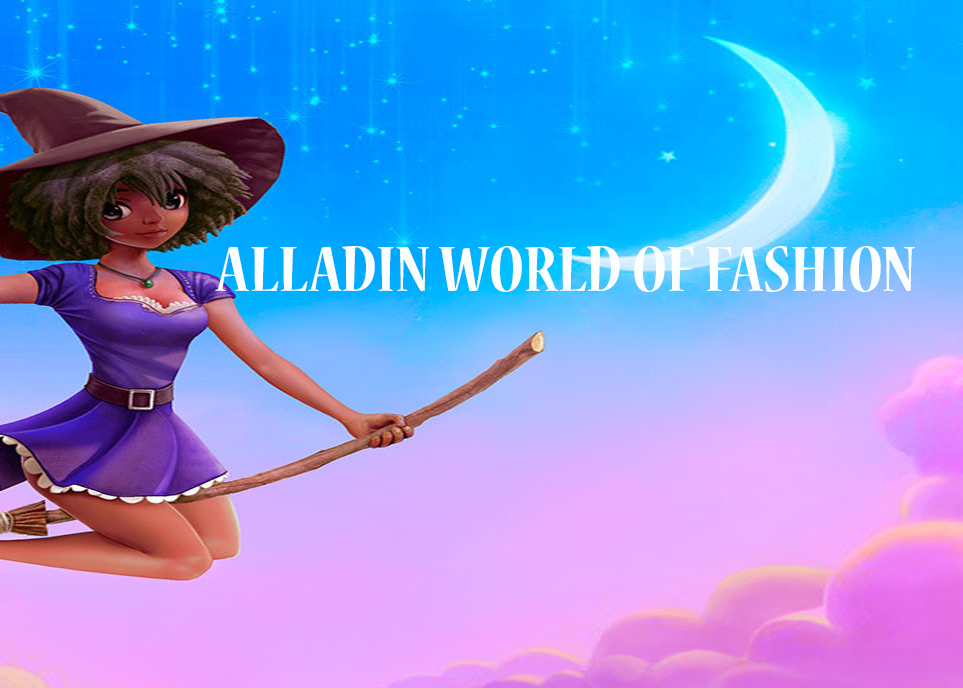
<style>
.page{position:relative;width:963px;height:688px}
.page>*{position:absolute;margin:0}
.t1{font:72px "NuevaStd-BoldCond";color:#fcfdfd}
</style>
<div class="page">
<p class="t1" style="left:215px;top:246px;width:700px;height:46px">ALLADIN WORLD OF FASHION</p>
</div>
